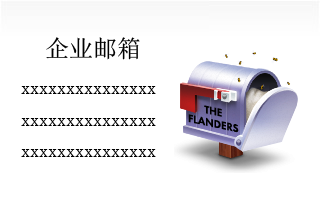
<style>
.page{position:relative;width:320px;height:210px;background:#ffffff}
.page>*{position:absolute;margin:0}
.t1{font:18px "SimSun";color:#000000}
.t2{font:24px "SimSun";color:#000000}
</style>
<div class="page">
<p class="t1" style="left:21px;top:37px;width:135px;height:120px"><span class="t2">  企业邮箱<br></span>xxxxxxxxxxxxxxxxxxxxxxxxxxxxxxxxxxxxxxxxxxxxxx</p>
</div>
